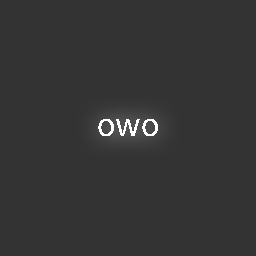
<style>
.page{position:relative;width:256px;height:256px;background:#333333}
.page>*{position:absolute;margin:0}
.t1{font:33.3px "AcuminConcept-Regular";color:#ffffff}
</style>
<div class="page">
<p class="t1" style="left:98px;top:119px;width:60px;height:17px">owo</p>
</div>
